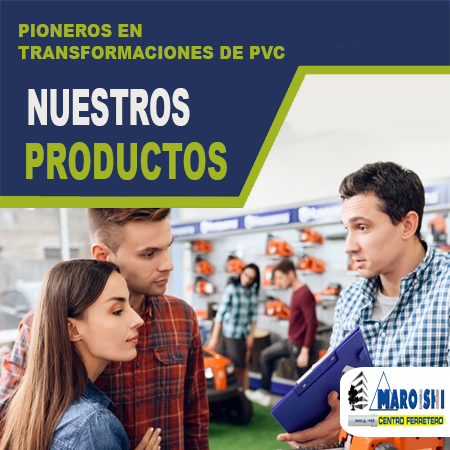
<style>
.page{position:relative;width:450px;height:450px;background:#24335e}
.page>*{position:absolute;margin:0}
.t1{font:18px "Arial-Black";color:#a1b522;scale:0.9 1}
.t2{font:50px "Arial-Black";color:#ecebe7;scale:0.53 1}
.t3{font:49.8px "Arial-Black";color:#a1b522;scale:0.59 1}
</style>
<div class="page">
<p class="t1" style="left:18px;top:24px;width:267px;height:35px">PIONEROS EN <br>TRANSFORMACIONES DE PVC</p>
<p class="t2" style="left:28px;top:88px;width:162px;height:38px">NUESTROS</p>
<p class="t3" style="left:26px;top:142px;width:201px;height:38px">PRODUCTOS</p>
</div>
